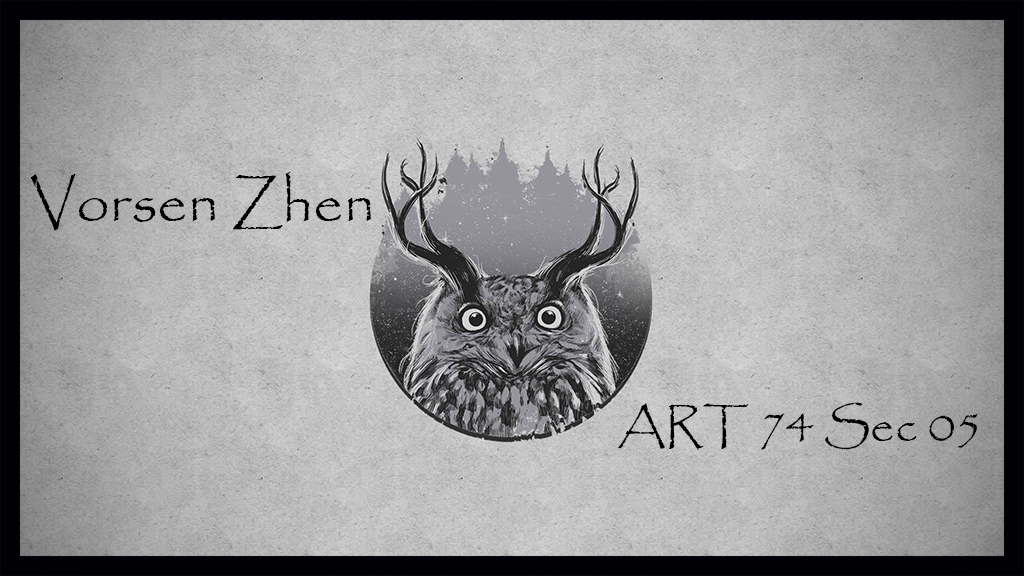
<style>
.page{position:relative;width:1024px;height:576px}
.page>*{position:absolute;margin:0}
.t1{font:60px "Papyrus-Regular";color:#000000}
.t2{font:48px "Papyrus-Regular";color:#000000}
</style>
<div class="page">
<p class="t1" style="left:30px;top:172px;width:341px;height:59px">Vorsen Zhen</p>
<p class="t2" style="left:618px;top:402px;width:360px;height:48px">ART 74 Sec 05</p>
</div>
